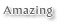
<style>
.page{position:relative;width:57px;height:22px;background:#ffffff}
.page>*{position:absolute;margin:0}
.t1{font:12px "AmiraParadiso";letter-spacing:0.05em;color:#666666}
</style>
<div class="page">
<p class="t1" style="left:3px;top:6px;width:50px;height:11px">Amazing</p>
</div>
